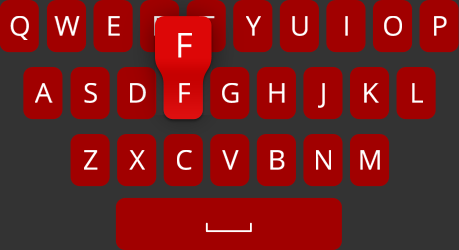
<style>
.page{position:relative;width:459px;height:250px;background:#a10000}
.page>*{position:absolute;margin:0}
.t1{font:27.3px "OpenSans";color:#ffffff;text-transform:uppercase}
.t2{font:27.3px "OpenSans";color:#dd0707;text-transform:uppercase}
.t3{font:34.1px "OpenSans";color:#ffffff;text-transform:uppercase}
</style>
<div class="page">
<p class="t1" style="left:10px;top:16px;width:19px;height:24px">q</p>
<p class="t1" style="left:54px;top:16px;width:26px;height:20px">w</p>
<p class="t1" style="left:108px;top:16px;width:12px;height:20px">e</p>
<p class="t2" style="left:154px;top:16px;width:15px;height:20px">r</p>
<p class="t2" style="left:199px;top:16px;width:16px;height:20px">t</p>
<p class="t1" style="left:246px;top:16px;width:15px;height:20px">y</p>
<p class="t1" style="left:292px;top:16px;width:16px;height:20px">u</p>
<p class="t1" style="left:345px;top:16px;width:3px;height:20px">i</p>
<p class="t1" style="left:384px;top:16px;width:18px;height:20px">o</p>
<p class="t1" style="left:434px;top:16px;width:13px;height:20px">p</p>
<p class="t3" style="left:178px;top:33px;width:14px;height:25px">f</p>
<p class="t1" style="left:35px;top:83px;width:18px;height:20px">a</p>
<p class="t1" style="left:84px;top:83px;width:13px;height:20px">s</p>
<p class="t1" style="left:130px;top:83px;width:16px;height:20px">d</p>
<p class="t1" style="left:179px;top:83px;width:11px;height:20px">f</p>
<p class="t1" style="left:179px;top:83px;width:11px;height:20px">f</p>
<p class="t1" style="left:222px;top:83px;width:17px;height:20px">g</p>
<p class="t1" style="left:269px;top:83px;width:16px;height:20px">h</p>
<p class="t1" style="left:318px;top:83px;width:7px;height:25px">j</p>
<p class="t1" style="left:364px;top:83px;width:15px;height:20px">k</p>
<p class="t1" style="left:412px;top:83px;width:11px;height:20px">l</p>
<p class="t1" style="left:84px;top:150px;width:14px;height:20px">z</p>
<p class="t1" style="left:129px;top:150px;width:16px;height:20px">x</p>
<p class="t1" style="left:177px;top:150px;width:15px;height:20px">c</p>
<p class="t1" style="left:222px;top:150px;width:17px;height:20px">v</p>
<p class="t1" style="left:270px;top:150px;width:15px;height:20px">b</p>
<p class="t1" style="left:316px;top:150px;width:15px;height:20px">n</p>
<p class="t1" style="left:360px;top:150px;width:20px;height:20px">m</p>
</div>
